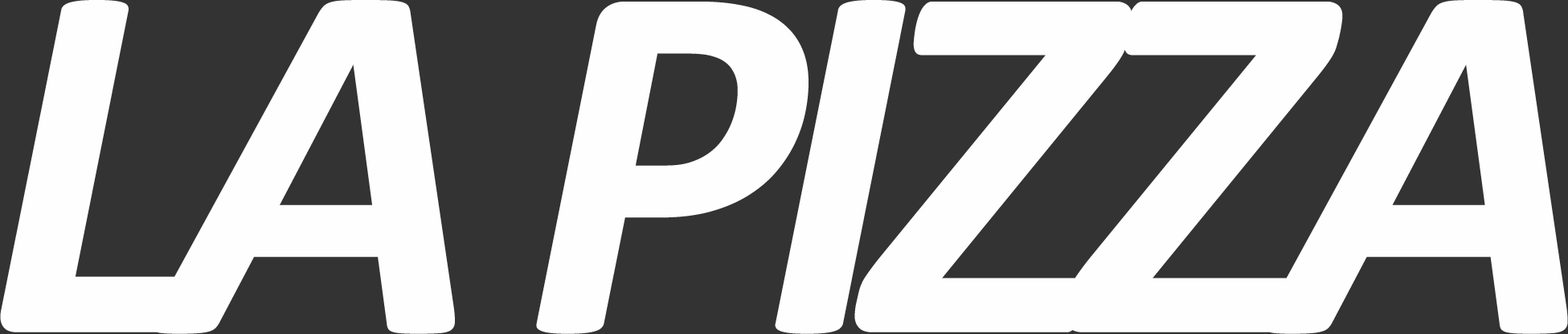
<style>
.page{position:relative;width:1568px;height:334px;background:#fffefe}
.page>*{position:absolute;margin:0}
.t1{font:522.4px "Calibri-BoldItalic";letter-spacing:-0.075em;color:#fffefe}
</style>
<div class="page">
<p class="t1" style="left:0px;top:0px;width:1568px;height:334px">LA PIZZA</p>
</div>
